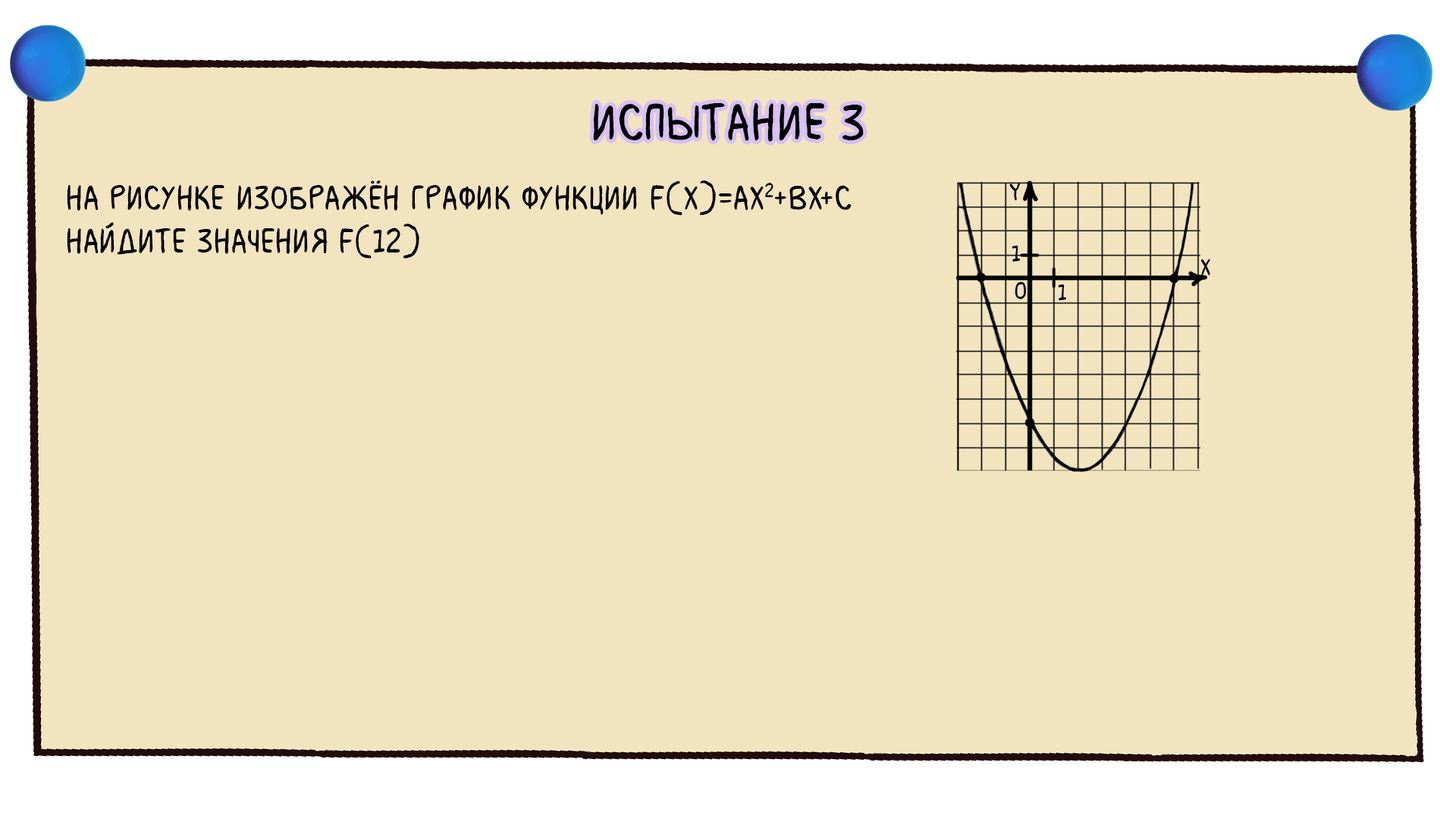
<style>
.page{position:relative;width:1456px;height:819px;background:#f3e4c0}
.page>*{position:absolute;margin:0}
.t1{font:54.6px "MilkMustacheBB";color:#000000}
.t2{font:36.4px "MilkMustacheBB";color:#000000}
</style>
<div class="page">
<p class="t1" style="left:593px;top:102px;width:271px;height:40px">испытание 3</p>
<p class="t2" style="left:67px;top:180px;width:785px;height:79px">На рисунке изображён график функции f(x)=ax2+bx+c <br>Найдите значения f(12)</p>
</div>
